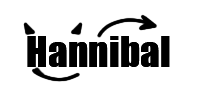
<style>
.page{position:relative;width:202px;height:110px;background:#ffffff}
.page>*{position:absolute;margin:0}
.t1{font:39.4px "Impact";color:#000000}
</style>
<div class="page">
<p class="t1" style="left:27px;top:36px;width:143px;height:31px">Hannibal</p>
</div>
